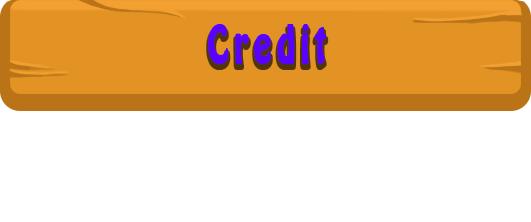
<style>
.page{position:relative;width:531px;height:222px;background:#ffffff}
.page>*{position:absolute;margin:0}
.t1{font:50.5px "Hobo-BT";letter-spacing:0.1em;color:#5a00ff;font-weight:bold;scale:0.72 1}
</style>
<div class="page">
<p class="t1" style="left:208px;top:24px;width:119px;height:40px">Credit</p>
</div>
